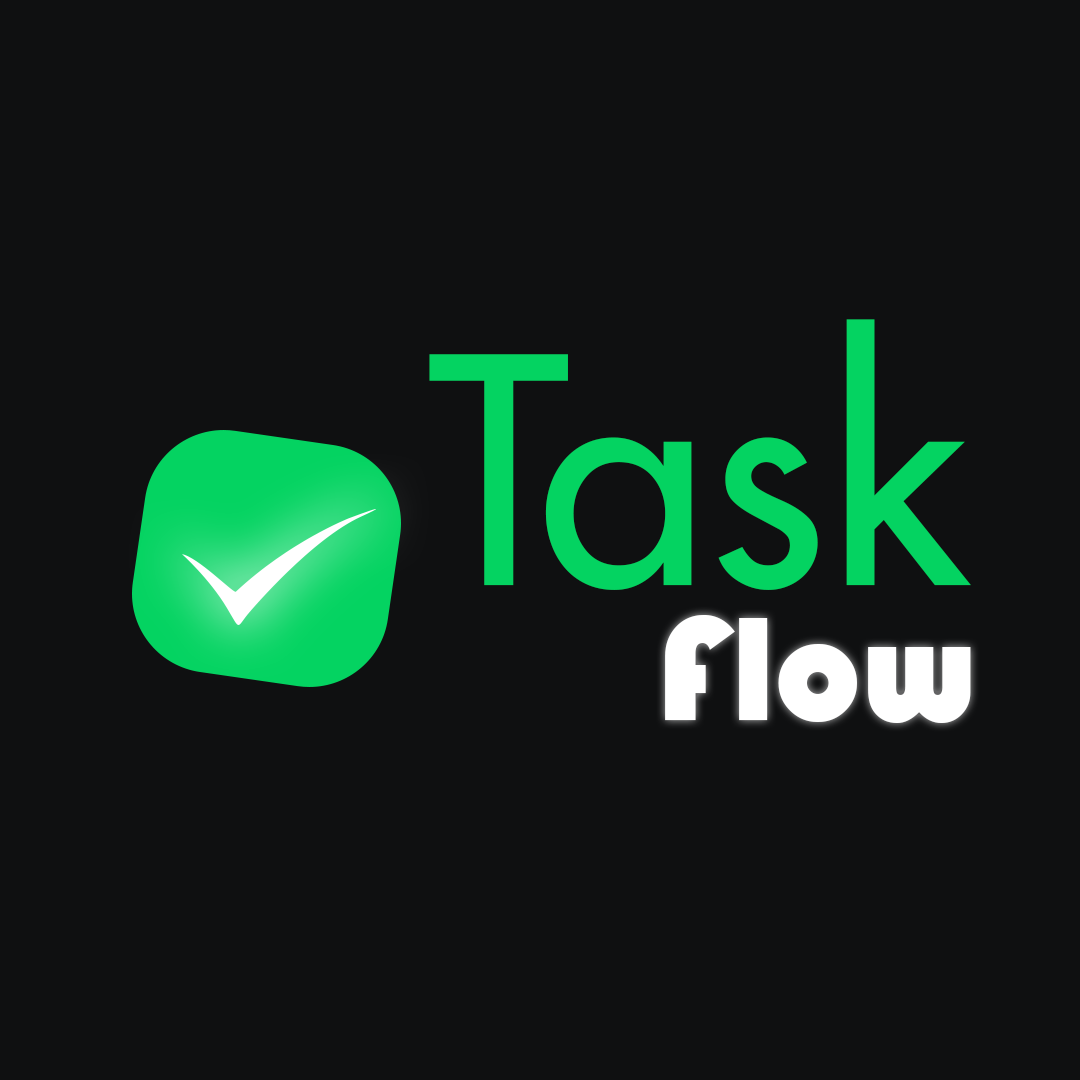
<style>
.page{position:relative;width:1080px;height:1080px;background:#0f1011}
.page>*{position:absolute;margin:0}
.t1{font:305.9px "Futura-Medium";color:#04d361}
.t2{font:152.9px "Bauhaus93";color:#ffffff}
</style>
<div class="page">
<p class="t1" style="left:429px;top:319px;width:542px;height:271px">Task</p>
<p class="t2" style="left:665px;top:615px;width:306px;height:108px">Flow</p>
</div>
